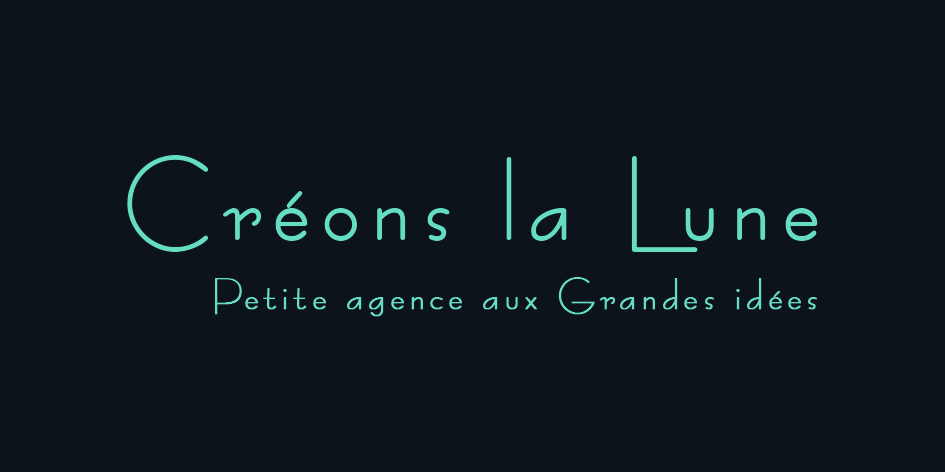
<style>
.page{position:relative;width:945px;height:472px;background:#0c131a}
.page>*{position:absolute;margin:0}
.t1{font:106.7px "BernardoModaBold";letter-spacing:0.1em;color:#64ddc1}
.t2{font:106.7px "BernardoModaBold";letter-spacing:0.1em;color:#64ddc1;text-transform:uppercase}
.t3{font:39.6px "BernardoModaSemibold";letter-spacing:0.1em;color:#64ddc1;font-weight:bold}
</style>
<div class="page">
<p class="t1" style="left:127px;top:155px;width:691px;height:97px"><span class="t2">C</span>réons la<span class="t2"> L</span>une</p>
<p class="t3" style="left:215px;top:277px;width:602px;height:40px">Petite agence aux Grandes idées</p>
</div>
